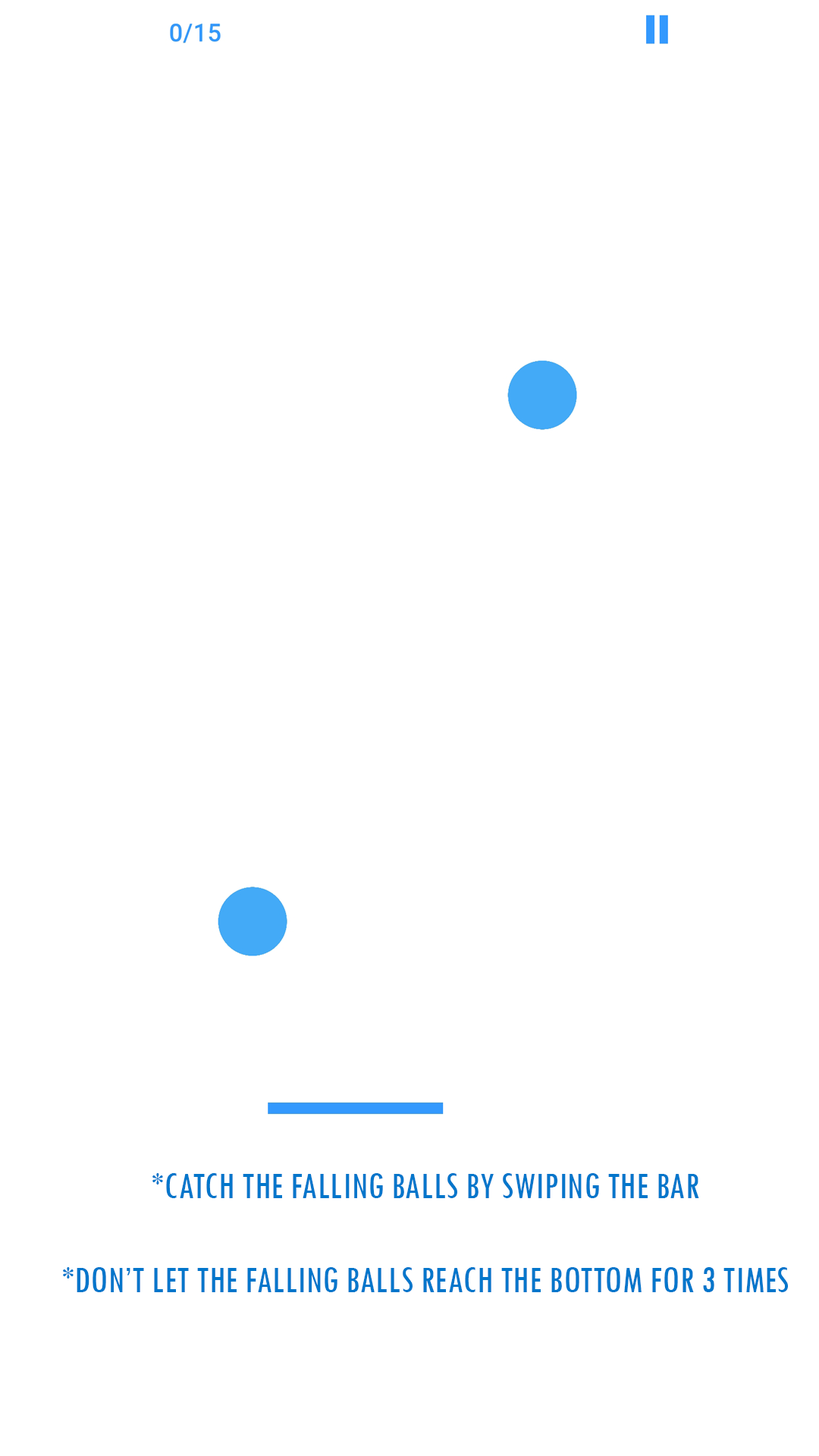
<style>
.page{position:relative;width:819px;height:1456px;background:#ffffff}
.page>*{position:absolute;margin:0}
.t1{font:39.1px "TwCenMT-Condensed";color:#0276cb}
</style>
<div class="page">
<p class="t1" style="left:63px;top:1173px;width:725px;height:119px;text-align:center">*CATCH THE FALLING BALLS BY SWIPING THE BAR<br><br>*DON’T LET THE FALLING BALLS REACH THE BOTTOM FOR 3 TIMES</p>
</div>
